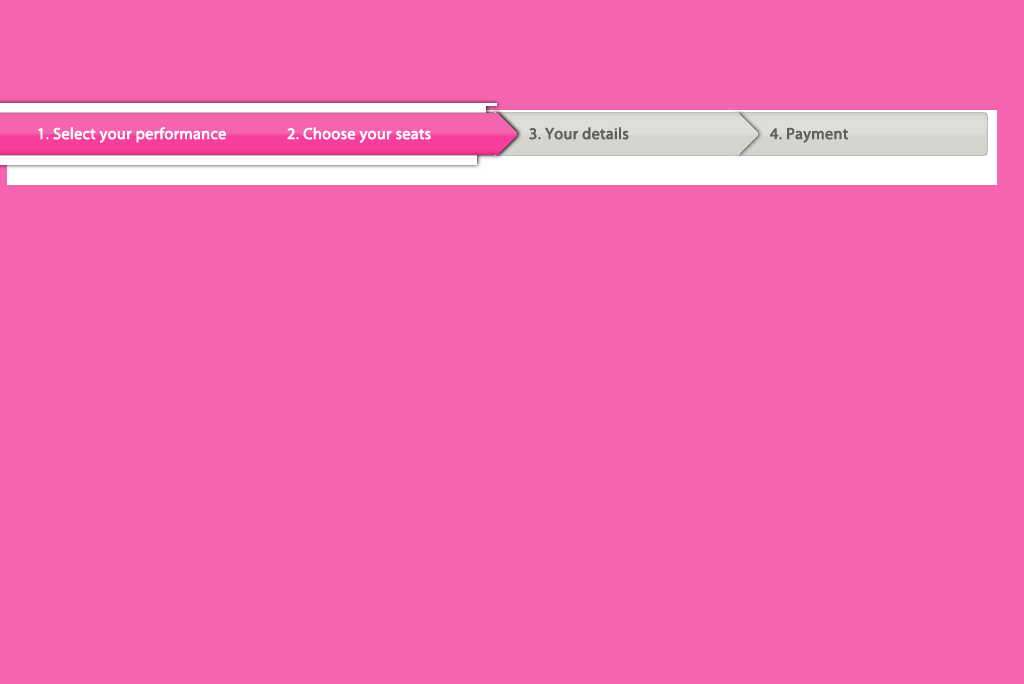
<style>
.page{position:relative;width:1024px;height:684px;background:#f564ae}
.page>*{position:absolute;margin:0}
.t1{font:16px "MyriadPro-Regular";color:#ffffff;font-weight:bold}
.t2{font:16px "MyriadPro-Regular";color:#606060;font-weight:bold}
</style>
<div class="page">
<p class="t1" style="left:38px;top:127px;width:188px;height:16px">1. Select your performance</p>
<p class="t1" style="left:287px;top:127px;width:144px;height:16px">2. Choose your seats</p>
<p class="t2" style="left:529px;top:127px;width:100px;height:13px">3. Your details</p>
<p class="t2" style="left:770px;top:127px;width:78px;height:16px">4. Payment</p>
</div>
